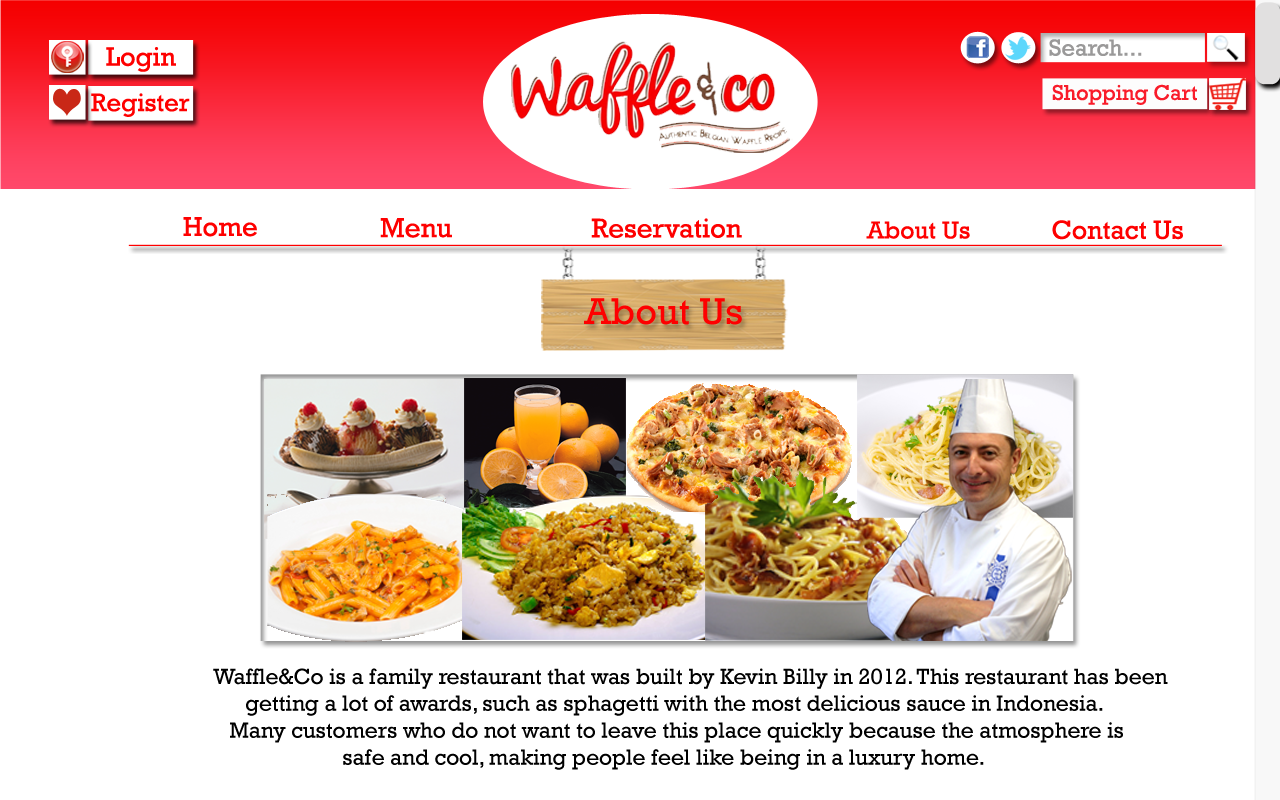
<style>
.page{position:relative;width:1280px;height:800px;background:#ffffff}
.page>*{position:absolute;margin:0}
.t1{font:27.5px "Rockwell";color:#fe0000}
.t2{font:28px "Rockwell";color:#fe0000}
.t3{font:27.6px "Rockwell";color:#fe0000}
.t4{font:24.9px "Rockwell";color:#fe0000}
.t5{font:26.7px "Rockwell";color:#fe0000}
.t6{font:38.1px "Rockwell";color:#fe0000}
.t7{font:22.4px "Rockwell";color:#000000}
</style>
<div class="page">
<p class="t1" style="left:183px;top:217px;width:74px;height:20px">Home</p>
<p class="t2" style="left:380px;top:218px;width:72px;height:20px">Menu</p>
<p class="t3" style="left:591px;top:218px;width:151px;height:20px">Reservation</p>
<p class="t4" style="left:866px;top:221px;width:104px;height:18px">About Us</p>
<p class="t5" style="left:1052px;top:220px;width:131px;height:20px">Contact Us</p>
<p class="t6" style="left:584px;top:298px;width:158px;height:27px">About Us</p>
<p class="t7" style="left:213px;top:668px;width:955px;height:102px">Waffle&amp;Co is a family restaurant that was built by Kevin Billy in 2012. This restaurant has been<br>  getting a lot of awards, such as sphagetti with the most delicious sauce in Indonesia.<br> Many customers who do not want to leave this place quickly because the atmosphere is<br>        safe and cool, making people feel like being in a luxury home.</p>
</div>
